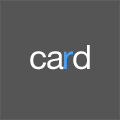
<style>
.page{position:relative;width:120px;height:120px;background:#555555}
.page>*{position:absolute;margin:0}
.t1{font:33.7px "HelveticaNeue";letter-spacing:-0.05em;color:#ffffff}
.t2{font:33.7px "HelveticaNeue";letter-spacing:-0.05em;color:#44a2ff}
</style>
<div class="page">
<p class="t1" style="left:30px;top:45px;width:60px;height:25px">ca<span class="t2">r</span>d</p>
</div>
